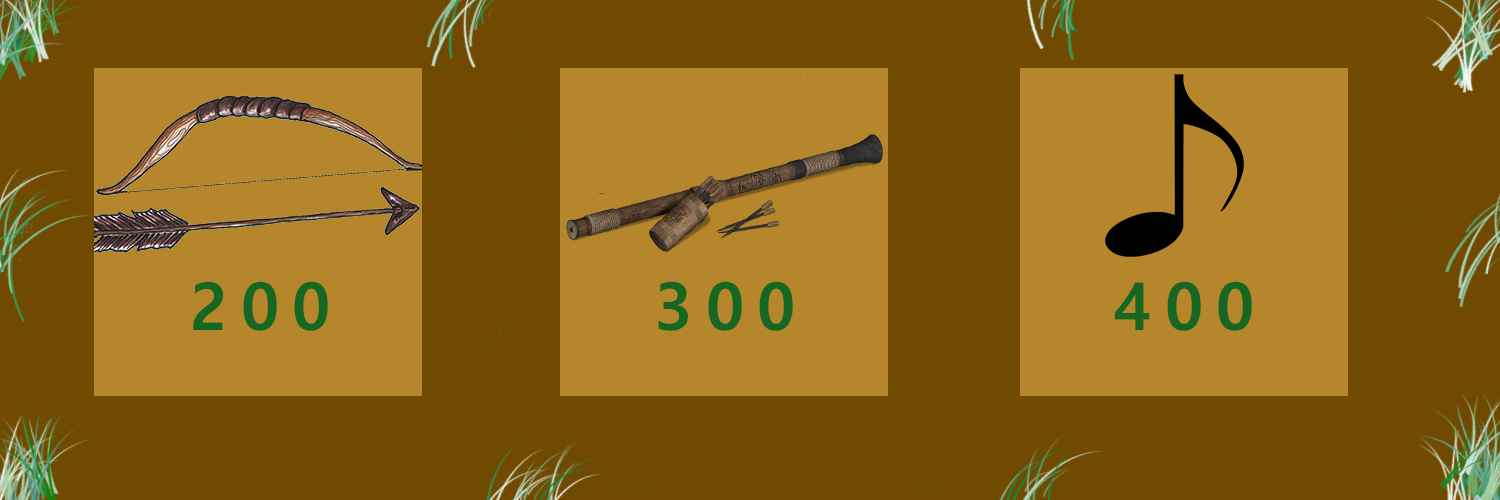
<style>
.page{position:relative;width:1500px;height:500px;background:#704a01}
.page>*{position:absolute;margin:0}
.t1{font:66px "MalgunGothicBold";letter-spacing:0.2em;color:#156722;text-transform:uppercase}
</style>
<div class="page">
<p class="t1" style="left:193px;top:281px;width:135px;height:50px">200</p>
<p class="t1" style="left:658px;top:281px;width:135px;height:50px">300</p>
<p class="t1" style="left:1114px;top:281px;width:138px;height:50px">400</p>
</div>
